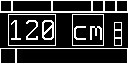
<style>
.page{position:relative;width:128px;height:64px;background:#000000}
.page>*{position:absolute;margin:0}
.t1{font:32px "Spleen16x32";color:#ffffff}
</style>
<div class="page">
<p class="t1" style="left:11px;top:20px;width:43px;height:20px">120</p>
<p class="t1" style="left:74px;top:26px;width:28px;height:14px">cm</p>
</div>
